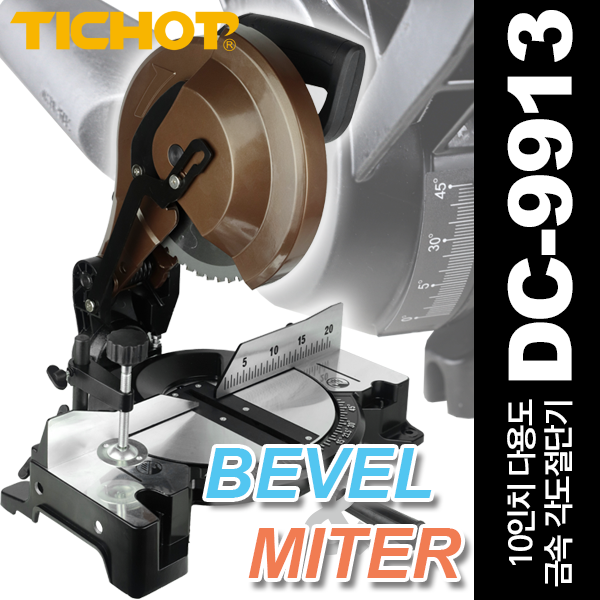
<style>
.page{position:relative;width:600px;height:600px;background:#ffffff}
.page>*{position:absolute;margin:0}
.t1{font:87.6px "Arial-Black";letter-spacing:-0.025em;color:#ffffff}
.t2{font:87.6px "Arial-Black";letter-spacing:-0.05em;color:#ffffff}
.t3{font:31.1px/36.3px "KoPubWorldDotumPB";letter-spacing:-0.05em;color:#ffffff}
.t4{font:69px "Arial-BoldItalicMT";color:#52c6f1}
.t5{font:69px "Arial-BoldItalicMT";color:#f17c52}
</style>
<div class="page">
<p class="t1" style="left:507px;top:10px;width:66px;height:371px;rotate:-90deg"><span class="t2">D</span>C-9<span class="t2">913</span></p>
<p class="t3" style="left:507px;top:399px;width:66px;height:188px;text-align:right;rotate:-90deg">10인치 다용도<br>금속 각도절단기</p>
<p class="t4" style="left:206px;top:448px;width:226px;height:50px">BEVEL</p>
<p class="t5" style="left:248px;top:528px;width:214px;height:50px">MITER</p>
</div>
